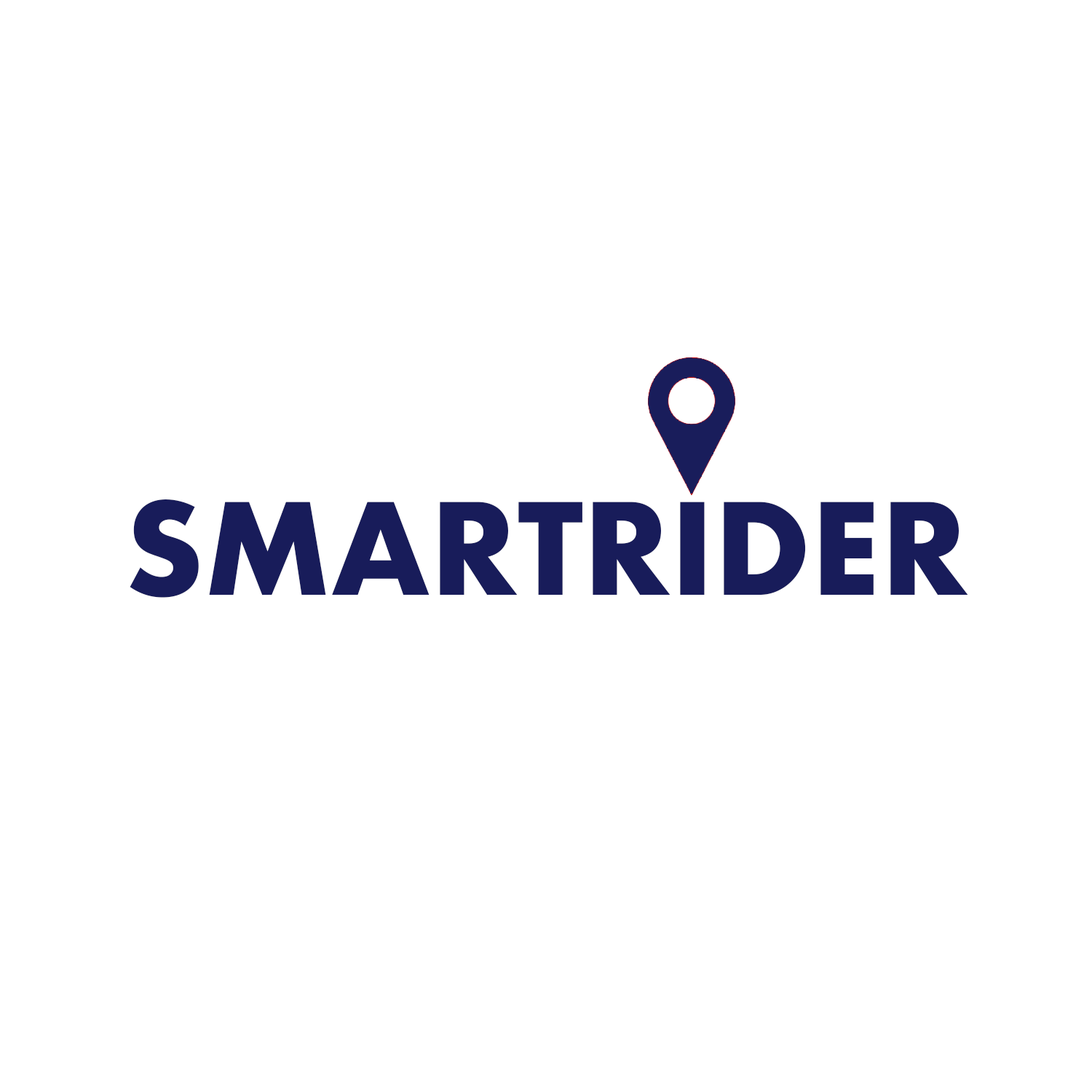
<style>
.page{position:relative;width:1092px;height:1092px;background:#ffffff}
.page>*{position:absolute;margin:0}
.t1{font:123px "Futura-Bold";color:#181c5a}
</style>
<div class="page">
<p class="t1" style="left:130px;top:499px;width:838px;height:99px">SMARTRIDER</p>
</div>
